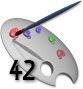
<style>
.page{position:relative;width:83px;height:89px;background:#ffffff}
.page>*{position:absolute;margin:0}
.t1{font:30px "AModernoCaps";color:#000000}
</style>
<div class="page">
<p class="t1" style="left:9px;top:60px;width:26px;height:20px">42</p>
</div>
